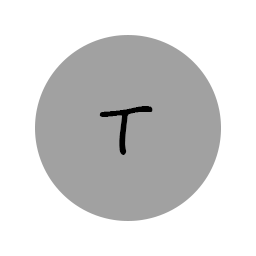
<style>
.page{position:relative;width:256px;height:256px;background:#ffffff}
.page>*{position:absolute;margin:0}
.t1{font:69.4px "SegoeScript";color:#000000}
</style>
<div class="page">
<p class="t1" style="left:99px;top:106px;width:54px;height:49px">T</p>
</div>
